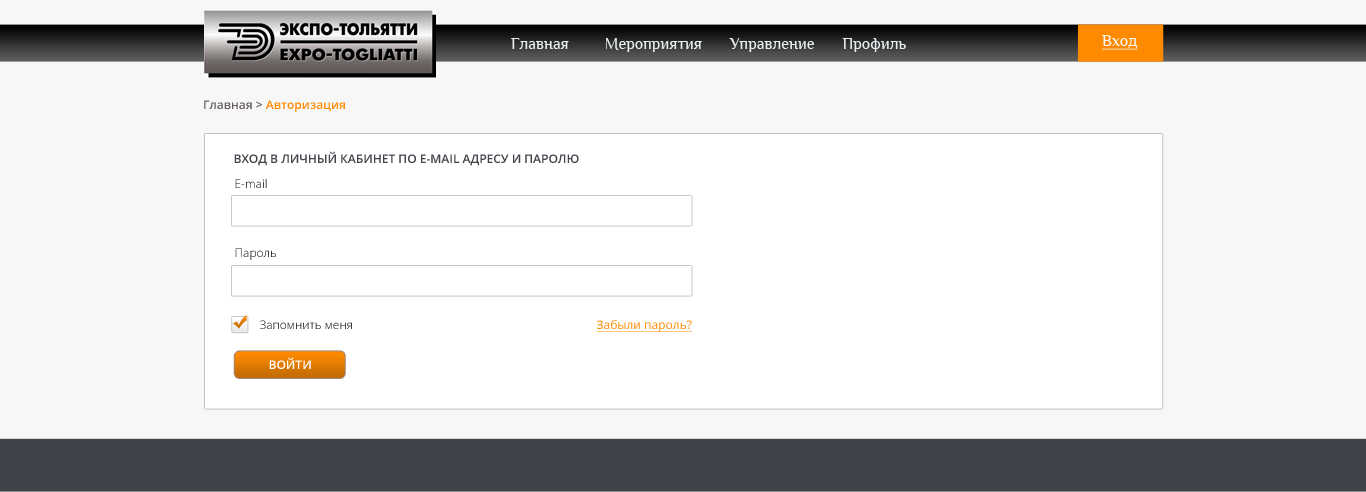
<style>
.page{position:relative;width:1366px;height:492px;background:#f7f7f7}
.page>*{position:absolute;margin:0}
.t1{font:16.5px "Philosopher";color:#e7eff1}
.t2{font:16px "Philosopher";color:#f7f7f7;text-decoration:underline}
.t3{font:12px "OpenSans-Semibold";color:#ff8a00}
.t4{font:12px "OpenSans-Semibold";color:#615a59}
.t5{font:12px "OpenSans-Semibold";color:#40434a;text-transform:uppercase}
.t6{font:12px "OpenSans-Light"}
.t7{font:12px "OpenSans";color:#ff8a00;text-decoration:underline}
.t8{font:12px "OpenSans-Semibold";color:#ffffff}
</style>
<div class="page">
<p class="t1" style="left:511px;top:38px;width:395px;height:14px">Главная         Мероприятия       Управление       Профиль</p>
<p class="t2" style="left:1102px;top:35px;width:36px;height:15px">Вход</p>
<p class="t3" style="left:204px;top:100px;width:141px;height:12px"><span class="t4">Главная &gt; </span>Авторизация</p>
<p class="t5" style="left:234px;top:151px;width:345px;height:15px">Вход в личный кабинет по e-mail адресу и паролю</p>
<p class="t6" style="left:235px;top:179px;width:32px;height:9px">E-mail</p>
<p class="t6" style="left:235px;top:248px;width:41px;height:12px">Пароль</p>
<p class="t6" style="left:260px;top:320px;width:92px;height:9px">Запомнить меня</p>
<p class="t7" style="left:596px;top:320px;width:96px;height:12px">Забыли пароль?</p>
<p class="t8" style="left:269px;top:357px;width:42px;height:12px">ВОЙТИ</p>
</div>
